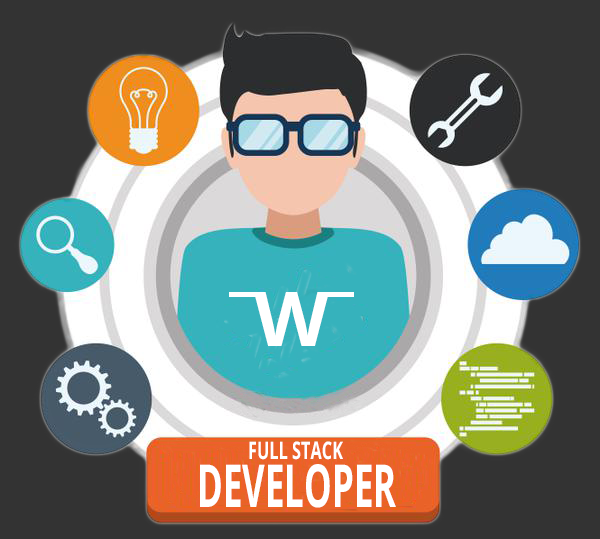
<style>
.page{position:relative;width:600px;height:539px;background:#333333}
.page>*{position:absolute;margin:0}
.t1{font:75.7px "OpenSans-Bold";color:#ffffff}
.t2{font:24.3px "OpenSans-Bold";color:#ffffff;scale:0.67 1}
.t3{font:59.1px "OpenSans-Bold";color:#ffffff;scale:0.59 1}
</style>
<div class="page">
<p class="t1" style="left:254px;top:292px;width:75px;height:54px">W</p>
<p class="t2" style="left:249px;top:441px;width:94px;height:19px">FULL STACK</p>
<p class="t3" style="left:200px;top:464px;width:196px;height:44px">DEVELOPER</p>
</div>
